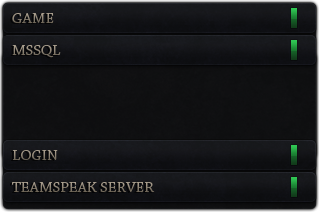
<style>
.page{position:relative;width:319px;height:212px}
.page>*{position:absolute;margin:0}
.t1{font:15px "ChaparralPro-Regular";color:#8e8372;text-transform:uppercase;scale:1.04 1}
</style>
<div class="page">
<p class="t1" style="left:12px;top:13px;width:42px;height:10px">Game</p>
<p class="t1" style="left:12px;top:45px;width:49px;height:13px">mssql</p>
<p class="t1" style="left:12px;top:150px;width:46px;height:10px">Login</p>
<p class="t1" style="left:12px;top:182px;width:143px;height:10px">Teamspeak server</p>
</div>
